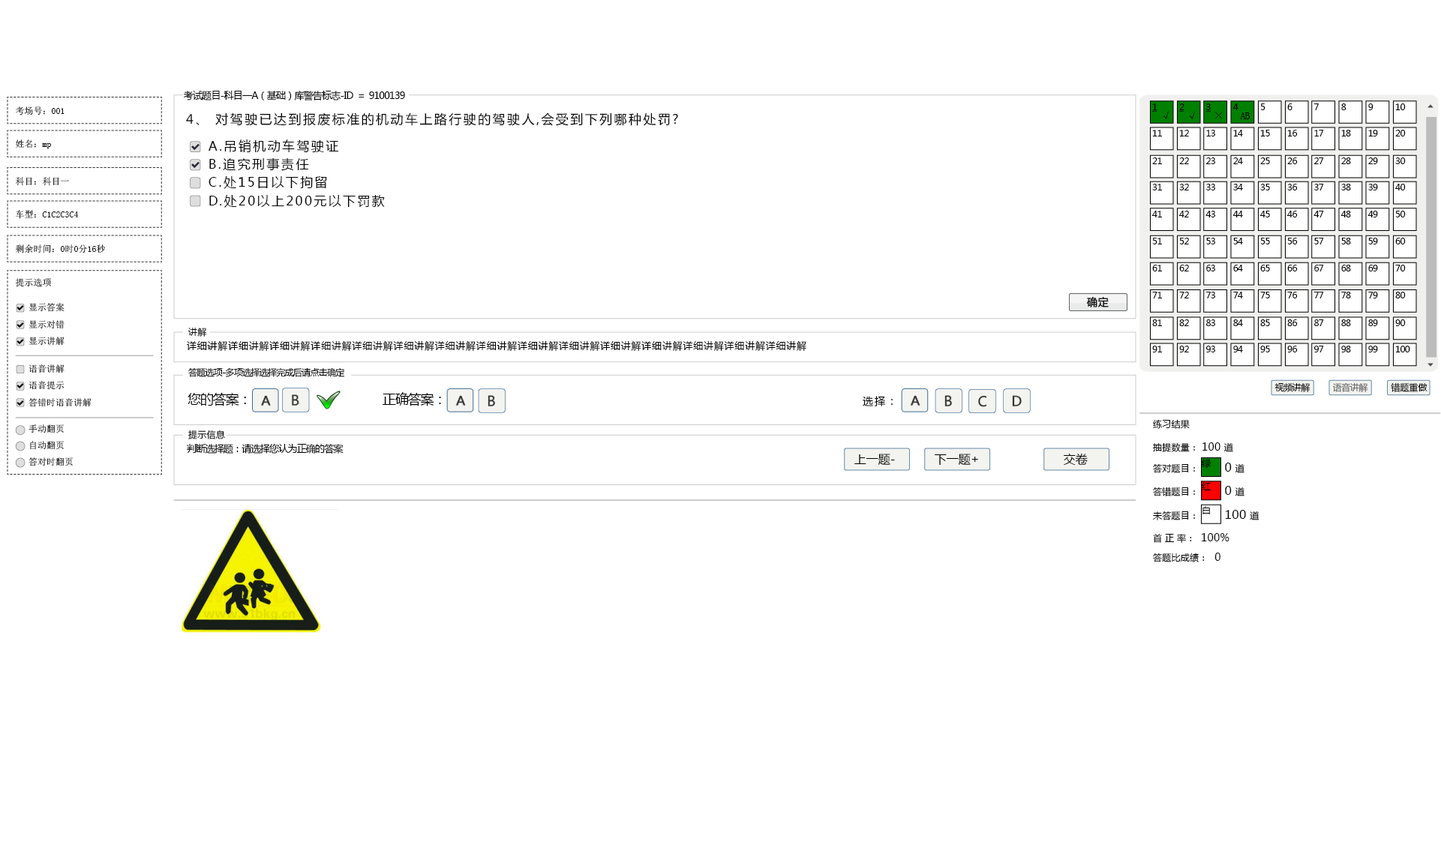
<style>
.page{position:relative;width:1441px;height:863px;background:#ffffff}
.page>*{position:absolute;margin:0}
.t1{font:9.8px "MicrosoftYaHei";letter-spacing:-0.06em;color:#000000}
.t2{font:9px "SimSun";color:#000000}
.t3{font:12.8px "MicrosoftYaHei";letter-spacing:0.14em;color:#000000}
.t4{font:9px "MicrosoftYaHei";letter-spacing:-0.06em;color:#000000;text-decoration:underline}
.t5{font:10.5px "SimSun";color:#000000}
.t6{font:10.5px "SimSun"}
.t7{font:9px "MicrosoftYaHei";letter-spacing:-0.06em;color:#000000}
.t8{font:10.5px "SimSun";letter-spacing:-0.06em;color:#000000}
.t9{font:12.8px/18.3px "MicrosoftYaHei";letter-spacing:0.14em;color:#000000}
.t10{font:9px "SimSun"}
.t11{font:9px/16.8px "SimSun"}
.t12{font:9px "MicrosoftYaHei";letter-spacing:0.02em;color:#000000}
.t13{font:9.8px "MicrosoftYaHei";letter-spacing:0.06em;color:#000000}
.t14{font:9px "MicrosoftYaHei";letter-spacing:-0.04em;color:#000000}
.t15{font:9px "MicrosoftYaHei";letter-spacing:-0.04em;color:#666666}
.t16{font:9px "MicrosoftYaHei";color:#000000}
.t17{font:13.5px "MicrosoftYaHei";letter-spacing:-0.06em;color:#000000}
.t18{font:10.5px "MicrosoftYaHei";letter-spacing:0.14em;color:#000000}
.t19{font:10.5px "MicrosoftYaHei";letter-spacing:0.02em;color:#000000}
.t20{font:12px "MicrosoftYaHei";color:#000000}
.t21{font:12px "MicrosoftYaHei";letter-spacing:0.02em;color:#000000}
.t22{font:9px/7.8px "MicrosoftYaHei";letter-spacing:0.02em;color:#000000}
.t23{font:10.5px/9.6px "MicrosoftYaHei";letter-spacing:0.02em;color:#000000}
.t24{font:9px/9.6px "MicrosoftYaHei";letter-spacing:0.02em;color:#000000}
</style>
<div class="page">
<p class="t1" style="left:184px;top:91px;width:221px;height:10px">考试题目-科目一A（基础）库警告标志-ID  =  9100139</p>
<p class="t2" style="left:16px;top:106px;width:48px;height:10px">考场号：001</p>
<p class="t3" style="left:186px;top:112px;width:492px;height:14px">4、 对驾驶已达到报废标准的机动车上路行驶的驾驶人,会受到下列哪种处罚?</p>
<p class="t4" style="left:1152px;top:104px;width:5px;height:8px">1</p>
<p class="t5" style="left:1162px;top:111px;width:6px;height:8px">√</p>
<p class="t4" style="left:1179px;top:104px;width:5px;height:8px">2</p>
<p class="t5" style="left:1189px;top:111px;width:6px;height:8px">√</p>
<p class="t4" style="left:1205px;top:104px;width:5px;height:8px">3</p>
<p class="t6" style="left:1215px;top:112px;width:7px;height:7px">×</p>
<p class="t7" style="left:1232px;top:104px;width:6px;height:6px">4</p>
<p class="t8" style="left:1240px;top:112px;width:10px;height:7px">AB</p>
<p class="t7" style="left:1260px;top:104px;width:5px;height:6px">5</p>
<p class="t7" style="left:1287px;top:104px;width:5px;height:6px">6</p>
<p class="t7" style="left:1313px;top:104px;width:6px;height:6px">7</p>
<p class="t7" style="left:1341px;top:104px;width:5px;height:6px">8</p>
<p class="t7" style="left:1368px;top:104px;width:5px;height:6px">9</p>
<p class="t7" style="left:1395px;top:104px;width:11px;height:6px">10</p>
<p class="t7" style="left:1152px;top:130px;width:10px;height:6px">11</p>
<p class="t7" style="left:1179px;top:130px;width:10px;height:6px">12</p>
<p class="t7" style="left:1206px;top:130px;width:9px;height:6px">13</p>
<p class="t7" style="left:1233px;top:130px;width:10px;height:6px">14</p>
<p class="t7" style="left:1260px;top:130px;width:10px;height:6px">15</p>
<p class="t7" style="left:1287px;top:130px;width:11px;height:6px">16</p>
<p class="t7" style="left:1314px;top:130px;width:10px;height:6px">17</p>
<p class="t7" style="left:1341px;top:130px;width:10px;height:6px">18</p>
<p class="t7" style="left:1368px;top:130px;width:10px;height:6px">19</p>
<p class="t7" style="left:1395px;top:130px;width:11px;height:6px">20</p>
<p class="t2" style="left:16px;top:140px;width:35px;height:8px">姓名：mp</p>
<p class="t9" style="left:208px;top:140px;width:177px;height:68px">A.吊销机动车驾驶证<br>B.追究刑事责任<br>C.处15日以下拘留<br>D.处20以上200元以下罚款</p>
<p class="t7" style="left:1152px;top:158px;width:10px;height:6px">21</p>
<p class="t7" style="left:1179px;top:158px;width:10px;height:6px">22</p>
<p class="t7" style="left:1206px;top:158px;width:9px;height:6px">23</p>
<p class="t7" style="left:1233px;top:158px;width:10px;height:6px">24</p>
<p class="t7" style="left:1260px;top:158px;width:10px;height:6px">25</p>
<p class="t7" style="left:1287px;top:158px;width:11px;height:6px">26</p>
<p class="t7" style="left:1314px;top:158px;width:10px;height:6px">27</p>
<p class="t7" style="left:1341px;top:158px;width:10px;height:6px">28</p>
<p class="t7" style="left:1368px;top:158px;width:10px;height:6px">29</p>
<p class="t7" style="left:1395px;top:158px;width:11px;height:6px">30</p>
<p class="t10" style="left:16px;top:177px;width:53px;height:9px">科目：科目一</p>
<p class="t7" style="left:1152px;top:184px;width:10px;height:6px">31</p>
<p class="t7" style="left:1179px;top:184px;width:10px;height:6px">32</p>
<p class="t7" style="left:1206px;top:184px;width:9px;height:6px">33</p>
<p class="t7" style="left:1233px;top:184px;width:10px;height:6px">34</p>
<p class="t7" style="left:1260px;top:184px;width:10px;height:6px">35</p>
<p class="t7" style="left:1287px;top:184px;width:11px;height:6px">36</p>
<p class="t7" style="left:1314px;top:184px;width:10px;height:6px">37</p>
<p class="t7" style="left:1341px;top:184px;width:10px;height:6px">38</p>
<p class="t7" style="left:1368px;top:184px;width:10px;height:6px">39</p>
<p class="t7" style="left:1395px;top:184px;width:11px;height:6px">40</p>
<p class="t2" style="left:16px;top:210px;width:63px;height:9px">车型：C1C2C3C4</p>
<p class="t7" style="left:1152px;top:211px;width:10px;height:7px">41</p>
<p class="t7" style="left:1179px;top:211px;width:10px;height:7px">42</p>
<p class="t7" style="left:1205px;top:211px;width:10px;height:7px">43</p>
<p class="t7" style="left:1232px;top:211px;width:11px;height:7px">44</p>
<p class="t7" style="left:1260px;top:211px;width:10px;height:7px">45</p>
<p class="t7" style="left:1287px;top:211px;width:11px;height:7px">46</p>
<p class="t7" style="left:1313px;top:211px;width:11px;height:7px">47</p>
<p class="t7" style="left:1340px;top:211px;width:11px;height:7px">48</p>
<p class="t7" style="left:1367px;top:211px;width:11px;height:7px">49</p>
<p class="t7" style="left:1395px;top:211px;width:11px;height:7px">50</p>
<p class="t2" style="left:16px;top:244px;width:89px;height:10px">剩余时间：0时0分16秒</p>
<p class="t7" style="left:1152px;top:238px;width:10px;height:6px">51</p>
<p class="t7" style="left:1179px;top:238px;width:10px;height:6px">52</p>
<p class="t7" style="left:1206px;top:238px;width:9px;height:6px">53</p>
<p class="t7" style="left:1233px;top:238px;width:10px;height:6px">54</p>
<p class="t7" style="left:1260px;top:238px;width:10px;height:6px">55</p>
<p class="t7" style="left:1287px;top:238px;width:11px;height:6px">56</p>
<p class="t7" style="left:1314px;top:238px;width:10px;height:6px">57</p>
<p class="t7" style="left:1341px;top:238px;width:10px;height:6px">58</p>
<p class="t7" style="left:1368px;top:238px;width:10px;height:6px">59</p>
<p class="t7" style="left:1395px;top:238px;width:11px;height:6px">60</p>
<p class="t7" style="left:1152px;top:265px;width:10px;height:7px">61</p>
<p class="t7" style="left:1179px;top:265px;width:10px;height:7px">62</p>
<p class="t7" style="left:1206px;top:265px;width:9px;height:7px">63</p>
<p class="t7" style="left:1233px;top:265px;width:10px;height:7px">64</p>
<p class="t7" style="left:1260px;top:265px;width:10px;height:7px">65</p>
<p class="t7" style="left:1287px;top:265px;width:11px;height:7px">66</p>
<p class="t7" style="left:1314px;top:265px;width:10px;height:7px">67</p>
<p class="t7" style="left:1341px;top:265px;width:10px;height:7px">68</p>
<p class="t7" style="left:1368px;top:265px;width:10px;height:7px">69</p>
<p class="t7" style="left:1395px;top:265px;width:11px;height:7px">70</p>
<p class="t10" style="left:16px;top:278px;width:35px;height:9px">提示选项</p>
<p class="t7" style="left:1152px;top:292px;width:10px;height:6px">71</p>
<p class="t7" style="left:1179px;top:292px;width:10px;height:6px">72</p>
<p class="t7" style="left:1205px;top:292px;width:10px;height:6px">73</p>
<p class="t7" style="left:1233px;top:292px;width:10px;height:6px">74</p>
<p class="t7" style="left:1260px;top:292px;width:10px;height:6px">75</p>
<p class="t7" style="left:1287px;top:292px;width:11px;height:6px">76</p>
<p class="t7" style="left:1313px;top:292px;width:11px;height:6px">77</p>
<p class="t7" style="left:1341px;top:292px;width:10px;height:6px">78</p>
<p class="t7" style="left:1368px;top:292px;width:10px;height:6px">79</p>
<p class="t7" style="left:1395px;top:292px;width:11px;height:6px">80</p>
<p class="t11" style="left:29px;top:303px;width:35px;height:43px">显示答案<br>显示对错<br>显示讲解</p>
<p class="t12" style="left:188px;top:328px;width:19px;height:9px">讲解</p>
<p class="t7" style="left:1152px;top:320px;width:10px;height:6px">81</p>
<p class="t7" style="left:1179px;top:320px;width:10px;height:6px">82</p>
<p class="t7" style="left:1206px;top:320px;width:9px;height:6px">83</p>
<p class="t7" style="left:1233px;top:320px;width:10px;height:6px">84</p>
<p class="t7" style="left:1260px;top:320px;width:10px;height:6px">85</p>
<p class="t7" style="left:1287px;top:320px;width:11px;height:6px">86</p>
<p class="t7" style="left:1314px;top:320px;width:10px;height:6px">87</p>
<p class="t7" style="left:1341px;top:320px;width:10px;height:6px">88</p>
<p class="t7" style="left:1368px;top:320px;width:10px;height:6px">89</p>
<p class="t7" style="left:1395px;top:320px;width:11px;height:6px">90</p>
<p class="t13" style="left:187px;top:340px;width:619px;height:11px">详细讲解详细讲解详细讲解详细讲解详细讲解详细讲解详细讲解详细讲解详细讲解详细讲解详细讲解详细讲解详细讲解详细讲解详细讲解</p>
<p class="t7" style="left:1152px;top:346px;width:10px;height:6px">91</p>
<p class="t7" style="left:1179px;top:346px;width:10px;height:6px">92</p>
<p class="t7" style="left:1206px;top:346px;width:9px;height:6px">93</p>
<p class="t7" style="left:1233px;top:346px;width:10px;height:6px">94</p>
<p class="t7" style="left:1260px;top:346px;width:10px;height:6px">95</p>
<p class="t7" style="left:1287px;top:346px;width:11px;height:6px">96</p>
<p class="t7" style="left:1314px;top:346px;width:10px;height:6px">97</p>
<p class="t7" style="left:1341px;top:346px;width:10px;height:6px">98</p>
<p class="t7" style="left:1368px;top:346px;width:10px;height:6px">99</p>
<p class="t7" style="left:1395px;top:346px;width:15px;height:6px">100</p>
<p class="t11" style="left:28px;top:364px;width:64px;height:43px">语音讲解<br>语音提示<br>答错时语音讲解</p>
<p class="t7" style="left:188px;top:368px;width:156px;height:9px">答题选项-多项选择选择完成后请点击确定</p>
<p class="t14" style="left:1274px;top:383px;width:36px;height:9px">视频讲解</p>
<p class="t15" style="left:1332px;top:382px;width:36px;height:10px">语音讲解</p>
<p class="t16" style="left:1390px;top:382px;width:37px;height:10px">错题重做</p>
<p class="t17" style="left:188px;top:392px;width:58px;height:14px">您的答案：</p>
<p class="t17" style="left:382px;top:392px;width:59px;height:14px">正确答案：</p>
<p class="t18" style="left:862px;top:396px;width:30px;height:10px">选择：</p>
<p class="t11" style="left:28px;top:424px;width:45px;height:42px">手动翻页<br>自动翻页<br>答对时翻页</p>
<p class="t12" style="left:1153px;top:419px;width:37px;height:10px">练习结果</p>
<p class="t12" style="left:188px;top:430px;width:37px;height:10px">提示信息</p>
<p class="t1" style="left:187px;top:443px;width:157px;height:11px">判断选择题：请选择您认为正确的答案</p>
<p class="t12" style="left:1153px;top:442px;width:80px;height:10px">抽提数量： <span class="t19">100 </span>道</p>
<p class="t20" style="left:854px;top:454px;width:41px;height:11px">上一题-</p>
<p class="t20" style="left:934px;top:454px;width:44px;height:11px">下一题+</p>
<p class="t20" style="left:1064px;top:453px;width:24px;height:12px">交卷</p>
<p class="t12" style="left:1201px;top:459px;width:10px;height:9px">绿</p>
<p class="t12" style="left:1153px;top:464px;width:42px;height:9px">答对题目：</p>
<p class="t21" style="left:1225px;top:463px;width:19px;height:10px">0 <span class="t12">道</span></p>
<p class="t12" style="left:1202px;top:482px;width:8px;height:9px">红</p>
<p class="t21" style="left:1225px;top:486px;width:19px;height:10px">0 <span class="t12">道</span></p>
<p class="t12" style="left:1153px;top:487px;width:42px;height:9px">答错题目：</p>
<p class="t12" style="left:1202px;top:506px;width:8px;height:8px">白</p>
<p class="t21" style="left:1225px;top:510px;width:34px;height:10px">100 <span class="t12">道</span></p>
<p class="t12" style="left:1153px;top:511px;width:42px;height:9px">未答题目：</p>
<p class="t22" style="left:1153px;top:533px;width:76px;height:29px">首 正 率：  <span class="t23">100%<br><br></span><span class="t24">答题比成绩：</span><span class="t23">  0</span></p>
</div>
